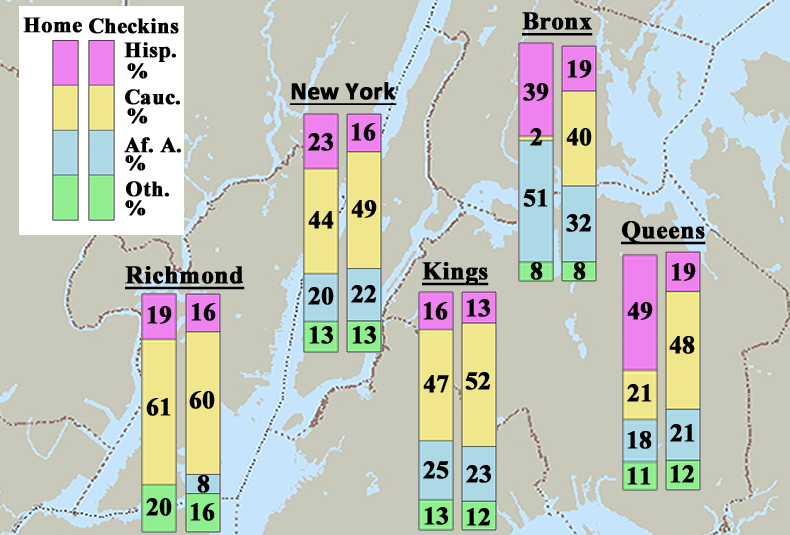
<style>
.page{position:relative;width:790px;height:535px;background:#c8c9bb}
.page>*{position:absolute;margin:0}
.t1{font:22px "TimesNewRomanPS-BoldMT";color:#000000;font-weight:bold}
.t2{font:25px "TimesNewRomanPS-BoldMT";color:#000000;font-weight:bold;text-decoration:underline}
.t3{font:25px "TimesNewRomanPS-BoldMT";color:#000000;font-weight:bold}
.t4{font:25px "Calibri-Bold";color:#000000;font-weight:bold;text-decoration:underline}
</style>
<div class="page">
<p class="t1" style="left:23px;top:17px;width:59px;height:16px">Home</p>
<p class="t2" style="left:522px;top:12px;width:71px;height:24px">Bronx</p>
<p class="t1" style="left:89px;top:18px;width:90px;height:16px">Checkins</p>
<p class="t1" style="left:124px;top:42px;width:52px;height:20px">Hisp.</p>
<p class="t1" style="left:127px;top:63px;width:21px;height:16px">%</p>
<p class="t3" style="left:567px;top:60px;width:25px;height:18px">19</p>
<p class="t1" style="left:125px;top:89px;width:55px;height:16px">Cauc.</p>
<p class="t4" style="left:290px;top:82px;width:107px;height:23px">New York</p>
<p class="t3" style="left:523px;top:83px;width:26px;height:18px">39</p>
<p class="t1" style="left:127px;top:108px;width:21px;height:16px">%</p>
<p class="t3" style="left:351px;top:123px;width:25px;height:18px">16</p>
<p class="t1" style="left:124px;top:137px;width:57px;height:16px">Af. A.</p>
<p class="t3" style="left:308px;top:133px;width:25px;height:18px">23</p>
<p class="t3" style="left:530px;top:128px;width:12px;height:18px">2</p>
<p class="t3" style="left:566px;top:128px;width:26px;height:18px">40</p>
<p class="t1" style="left:125px;top:155px;width:21px;height:16px">%</p>
<p class="t1" style="left:126px;top:181px;width:43px;height:16px">Oth.</p>
<p class="t3" style="left:523px;top:189px;width:25px;height:18px">51</p>
<p class="t1" style="left:125px;top:200px;width:21px;height:16px">%</p>
<p class="t3" style="left:351px;top:200px;width:26px;height:18px">49</p>
<p class="t3" style="left:308px;top:211px;width:26px;height:18px">44</p>
<p class="t3" style="left:566px;top:214px;width:25px;height:18px">32</p>
<p class="t2" style="left:621px;top:221px;width:85px;height:24px">Queens</p>
<p class="t2" style="left:125px;top:266px;width:120px;height:24px">Richmond</p>
<p class="t2" style="left:422px;top:262px;width:67px;height:24px">Kings</p>
<p class="t3" style="left:530px;top:262px;width:13px;height:18px">8</p>
<p class="t3" style="left:573px;top:262px;width:13px;height:18px">8</p>
<p class="t3" style="left:671px;top:263px;width:25px;height:18px">19</p>
<p class="t3" style="left:308px;top:287px;width:26px;height:18px">20</p>
<p class="t3" style="left:351px;top:285px;width:25px;height:18px">22</p>
<p class="t3" style="left:191px;top:303px;width:25px;height:18px">16</p>
<p class="t3" style="left:423px;top:302px;width:25px;height:18px">16</p>
<p class="t3" style="left:466px;top:299px;width:24px;height:18px">13</p>
<p class="t3" style="left:627px;top:302px;width:26px;height:18px">49</p>
<p class="t3" style="left:147px;top:306px;width:25px;height:18px">19</p>
<p class="t3" style="left:309px;top:326px;width:24px;height:18px">13</p>
<p class="t3" style="left:352px;top:326px;width:24px;height:18px">13</p>
<p class="t3" style="left:669px;top:336px;width:26px;height:18px">48</p>
<p class="t3" style="left:423px;top:375px;width:26px;height:18px">47</p>
<p class="t3" style="left:465px;top:372px;width:25px;height:18px">52</p>
<p class="t3" style="left:627px;top:384px;width:25px;height:18px">21</p>
<p class="t3" style="left:146px;top:398px;width:25px;height:18px">61</p>
<p class="t3" style="left:189px;top:391px;width:26px;height:18px">60</p>
<p class="t3" style="left:670px;top:424px;width:25px;height:18px">21</p>
<p class="t3" style="left:627px;top:431px;width:25px;height:18px">18</p>
<p class="t3" style="left:423px;top:461px;width:26px;height:18px">25</p>
<p class="t3" style="left:466px;top:465px;width:25px;height:18px">23</p>
<p class="t3" style="left:627px;top:467px;width:24px;height:18px">11</p>
<p class="t3" style="left:670px;top:465px;width:24px;height:18px">12</p>
<p class="t3" style="left:197px;top:475px;width:13px;height:18px">8</p>
<p class="t3" style="left:146px;top:498px;width:26px;height:18px">20</p>
<p class="t3" style="left:190px;top:503px;width:25px;height:18px">16</p>
<p class="t3" style="left:424px;top:507px;width:24px;height:18px">13</p>
<p class="t3" style="left:466px;top:508px;width:24px;height:18px">12</p>
</div>
